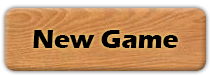
<style>
.page{position:relative;width:210px;height:75px}
.page>*{position:absolute;margin:0}
.t1{font:26.7px "ErasITC-Bold";color:#000000}
</style>
<div class="page">
<p class="t1" style="left:33px;top:30px;width:145px;height:18px">New Game</p>
</div>
